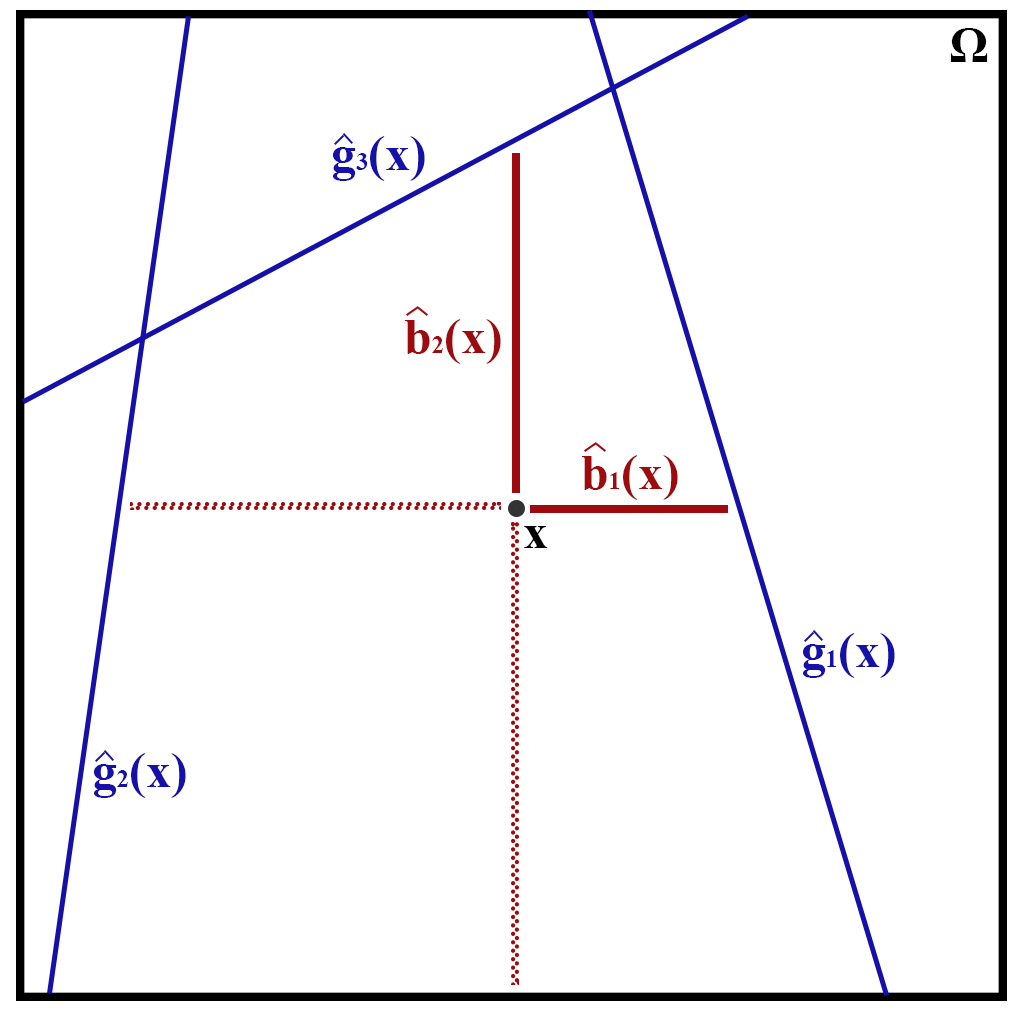
<style>
.page{position:relative;width:1020px;height:1012px;background:#ffffff}
.page>*{position:absolute;margin:0}
.t1{font:50px "TimesNewRomanPS-BoldMT";color:#000000}
.t2{font:50px "TimesNewRomanPS-BoldMT";color:#1410a9}
.t3{font:12px "TimesNewRomanPS-BoldMT";color:#1410a9}
.t4{font:25px "TimesNewRomanPS-BoldMT";color:#1410a9}
.t5{font:50px "TimesNewRomanPS-BoldMT";color:#9e0b0f}
.t6{font:12px "TimesNewRomanPS-BoldMT";color:#9e0b0f}
.t7{font:25px "TimesNewRomanPS-BoldMT";color:#9e0b0f}
.t8{font:12px "TimesNewRomanPS-BoldMT";color:#000000}
</style>
<div class="page">
<p class="t1" style="left:950px;top:28px;width:38px;height:34px">Ω</p>
<p class="t2" style="left:333px;top:136px;width:92px;height:45px"><span class="t3">g</span><span class="t4">3</span>(x)</p>
<p class="t5" style="left:404px;top:319px;width:97px;height:45px"><span class="t6">b</span><span class="t7">2</span>(x)</p>
<p class="t5" style="left:581px;top:455px;width:97px;height:45px"><span class="t6">b</span><span class="t7">1</span>(x)</p>
<p class="t8" style="left:524px;top:526px;width:24px;height:22px">x</p>
<p class="t2" style="left:803px;top:633px;width:92px;height:45px"><span class="t3">g</span><span class="t4">1</span>(x)</p>
<p class="t2" style="left:94px;top:753px;width:92px;height:45px"><span class="t3">g</span><span class="t4">2</span>(x)</p>
</div>
